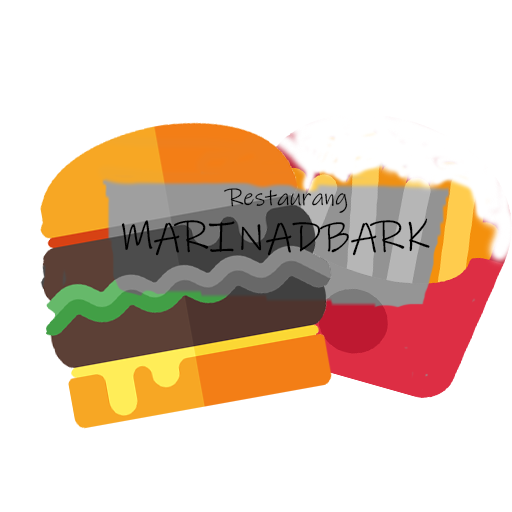
<style>
.page{position:relative;width:512px;height:512px;background:#ffffff}
.page>*{position:absolute;margin:0}
.t1{font:24px "InkFree";color:#000000}
.t2{font:43px "InkFree";color:#000000}
</style>
<div class="page">
<p class="t1" style="left:224px;top:188px;width:124px;height:25px">Restaurang</p>
<p class="t2" style="left:121px;top:218px;width:309px;height:38px">MARINADBARK</p>
</div>
